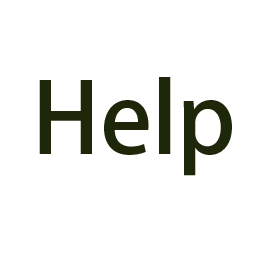
<style>
.page{position:relative;width:256px;height:256px;background:#ffffff}
.page>*{position:absolute;margin:0}
.t1{font:96px "AdobeHeitiStd-Regular";color:#1f270a}
</style>
<div class="page">
<p class="t1" style="left:39px;top:77px;width:193px;height:99px">Help</p>
</div>
